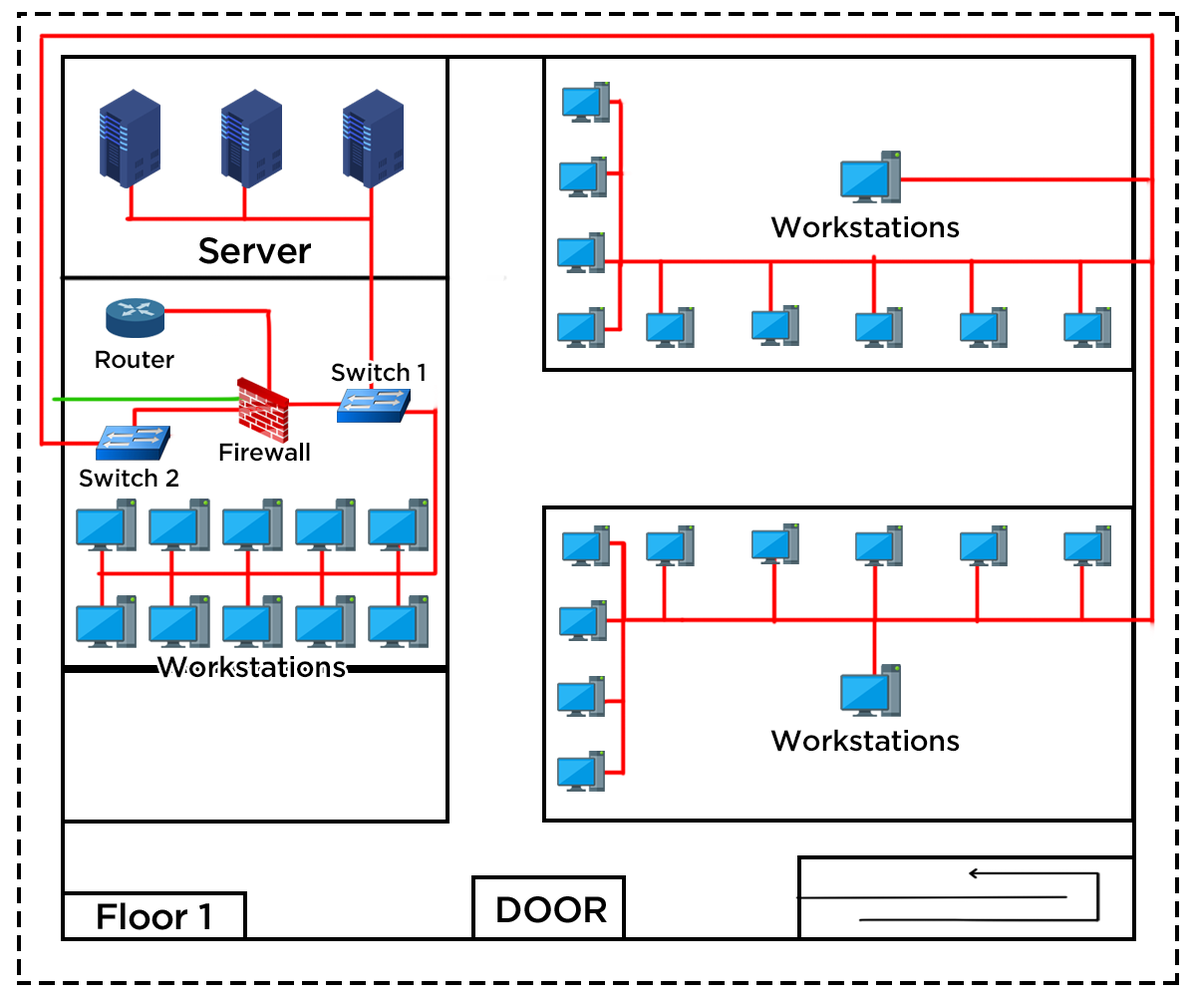
<style>
.page{position:relative;width:1196px;height:997px;background:#ffffff}
.page>*{position:absolute;margin:0}
.t1{font:29.2px "iCielGotham-Medium";letter-spacing:-0.02em;color:#000000}
.t2{font:36.3px "iCielGotham-Medium";letter-spacing:-0.02em;color:#000000}
.t3{font:24.4px "iCielGotham-Medium";letter-spacing:-0.02em;color:#000000}
</style>
<div class="page">
<p class="t1" style="left:771px;top:215px;width:189px;height:23px">Workstations</p>
<p class="t2" style="left:198px;top:237px;width:113px;height:27px">Server</p>
<p class="t3" style="left:96px;top:350px;width:78px;height:19px">Router</p>
<p class="t3" style="left:331px;top:363px;width:94px;height:19px">Switch 1</p>
<p class="t3" style="left:219px;top:443px;width:91px;height:19px">Firewall</p>
<p class="t3" style="left:79px;top:469px;width:99px;height:18px">Switch 2</p>
<p class="t1" style="left:157px;top:655px;width:189px;height:23px">Workstations</p>
<p class="t1" style="left:771px;top:729px;width:189px;height:23px">Workstations</p>
<p class="t2" style="left:98px;top:902px;width:111px;height:28px">Floor 1</p>
<p class="t2" style="left:497px;top:896px;width:110px;height:27px">DOOR</p>
</div>
